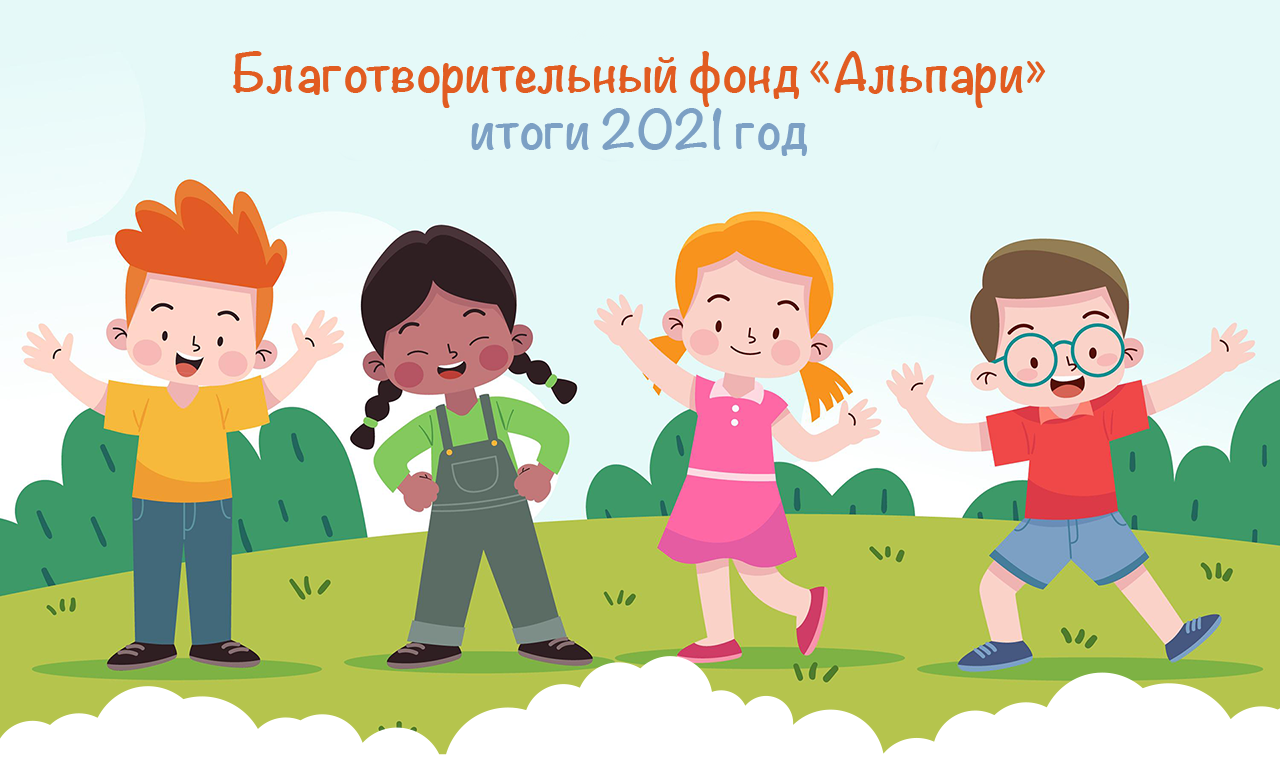
<style>
.page{position:relative;width:1280px;height:760px;background:#e5f9f8}
.page>*{position:absolute;margin:0}
.t1{font:48px "Noteworthy-Bold";color:#e15c21}
.t2{font:48px "Noteworthy-Bold";color:#7ca0c4}
</style>
<div class="page">
<p class="t1" style="left:233px;top:51px;width:813px;height:105px;text-align:center">Благотворительный фонд «Альпари»<br><span class="t2">итоги 2021 год</span></p>
</div>
